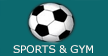
<style>
.page{position:relative;width:108px;height:56px;background:#0c696e}
.page>*{position:absolute;margin:0}
.t1{font:10.3px "Verdana";color:#fdfef9;scale:1.03 1}
</style>
<div class="page">
<p class="t1" style="left:13px;top:45px;width:80px;height:8px">SPORTS &amp; GYM</p>
</div>
